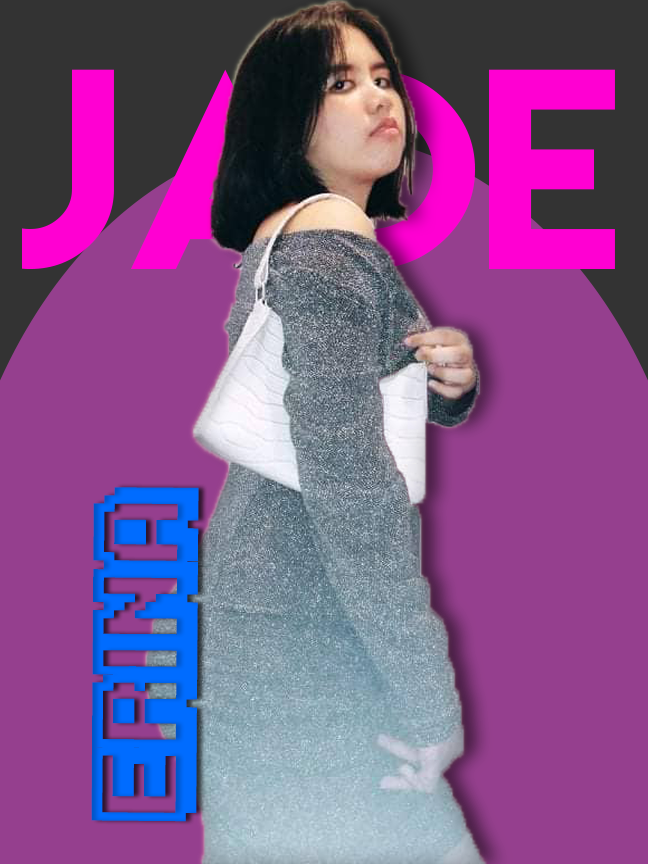
<style>
.page{position:relative;width:648px;height:864px;background:#953f8e}
.page>*{position:absolute;margin:0}
.t1{font:253.2px "LemonMilk";scale:1.05 1}
.t2{font:107.4px "KarmaticArcade";color:#006cfe;scale:0.77 1}
</style>
<div class="page">
<p class="t1" style="left:22px;top:69px;width:593px;height:200px">JADE</p>
<p class="t2" style="left:91px;top:487px;width:108px;height:335px;rotate:-90deg">ERINA</p>
</div>
